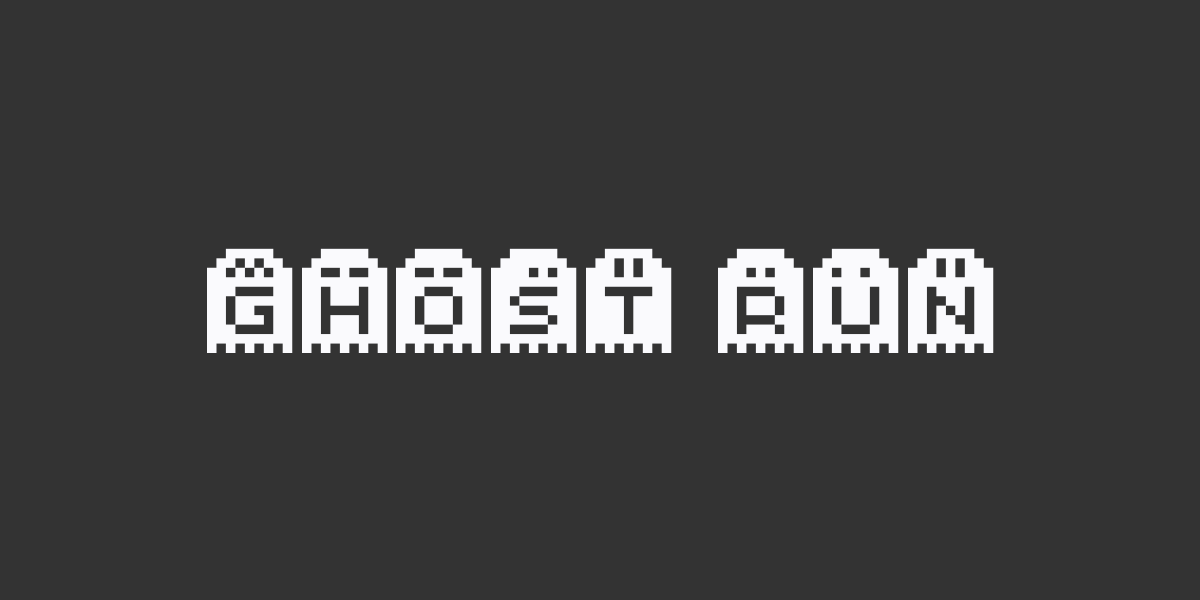
<style>
.page{position:relative;width:1200px;height:600px;background:#333333}
.page>*{position:absolute;margin:0}
.t1{font:104.2px "Spoopy-Ghost-Pixels";color:#fafafd}
</style>
<div class="page">
<p class="t1" style="left:207px;top:248px;width:787px;height:105px">GHOST RUN</p>
</div>
